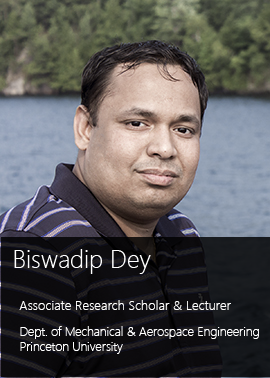
<style>
.page{position:relative;width:270px;height:378px}
.page>*{position:absolute;margin:0}
.t1{font:25px "SegoeUI-Light";color:#ffffff}
.t2{font:41.7px "SegoeUI-Light";color:#ffffff}
.t3{font:13.3px "SegoeUI-Light";color:#ffffff}
.t4{font:16.7px "SegoeUI-Light";color:#ffffff}
.t5{font:12.5px "SegoeUI-Light";color:#ffffff}
</style>
<div class="page">
<p class="t1" style="left:14px;top:249px;width:137px;height:25px"><span class="t2"> </span>Biswadip Dey</p>
<p class="t3" style="left:19px;top:300px;width:212px;height:10px"><span class="t4">   <br>    </span>Associate Research Scholar &amp; Lecturer</p>
<p class="t5" style="left:20px;top:326px;width:239px;height:28px">Dept. of Mechanical &amp; Aerospace Engineering<br>   Princeton University</p>
</div>
